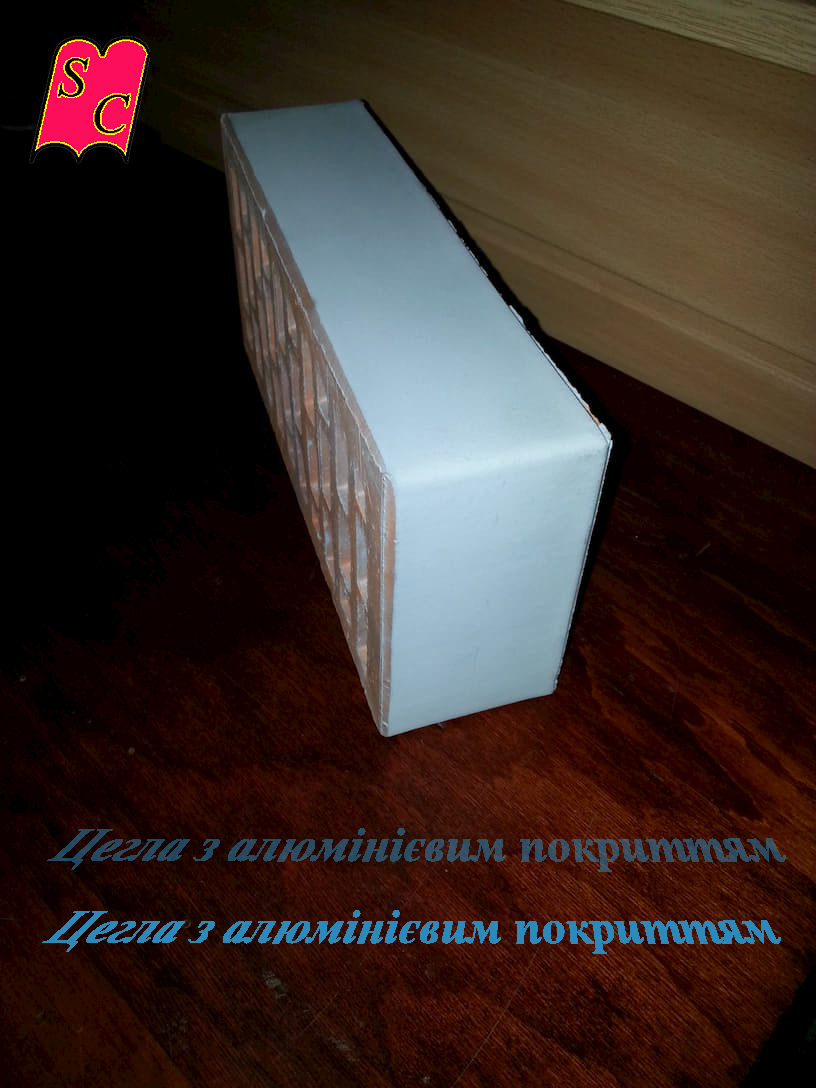
<style>
.page{position:relative;width:816px;height:1088px}
.page>*{position:absolute;margin:0}
.t1{font:48px "TimesNewRomanPS-BoldItalicMT";letter-spacing:0.01em;color:#2f4d60}
.t2{font:48px "TimesNewRomanPS-BoldItalicMT";letter-spacing:0.01em;color:#2d89b9}
</style>
<div class="page">
<p class="t1" style="left:47px;top:828px;width:739px;height:44px">Цегла з алюмінієвим покриттям</p>
<p class="t2" style="left:42px;top:910px;width:739px;height:44px">Цегла з алюмінієвим покриттям</p>
</div>
